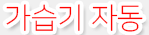
<style>
.page{position:relative;width:149px;height:35px;background:#ffffff}
.page>*{position:absolute;margin:0}
.t1{font:29px "NanumSquareL";color:#fe0300}
</style>
<div class="page">
<p class="t1" style="left:6px;top:4px;width:137px;height:28px">가습기 자동</p>
</div>
